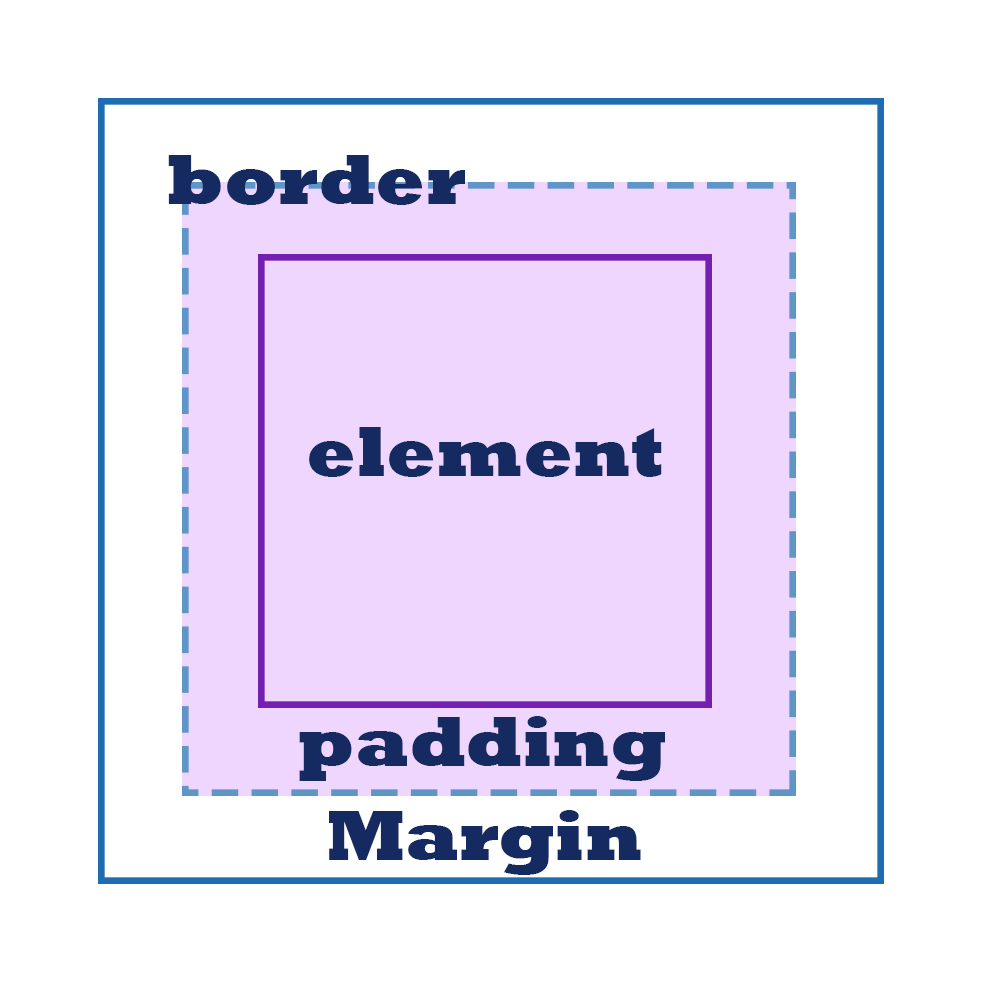
<style>
.page{position:relative;width:1000px;height:1000px;background:#ffffff}
.page>*{position:absolute;margin:0}
.t1{font:72px "Rockwell-ExtraBold";color:#142a61}
</style>
<div class="page">
<p class="t1" style="left:168px;top:155px;width:297px;height:50px">border</p>
<p class="t1" style="left:309px;top:427px;width:353px;height:50px">element</p>
<p class="t1" style="left:299px;top:716px;width:366px;height:65px">padding</p>
<p class="t1" style="left:329px;top:810px;width:312px;height:65px">Margin</p>
</div>
